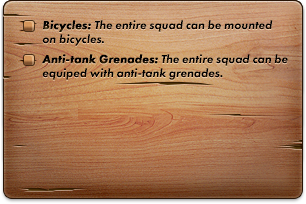
<style>
.page{position:relative;width:306px;height:204px}
.page>*{position:absolute;margin:0}
.t1{font:12px/14px "FuturaPT-HeavyObl";color:#000000}
.t2{font:12px/14px "FuturaPT-HeavyObl";color:#000000;font-weight:bold}
</style>
<div class="page">
<p class="t1" style="left:42px;top:20px;width:231px;height:26px"><span class="t2">Bicycles: </span>The entire squad can be mounted<br>on bicycles.</p>
<p class="t1" style="left:42px;top:54px;width:246px;height:26px"><span class="t2">Anti-tank Grenades:</span> The entire squad can be<br>equiped with anti-tank grenades.</p>
</div>
